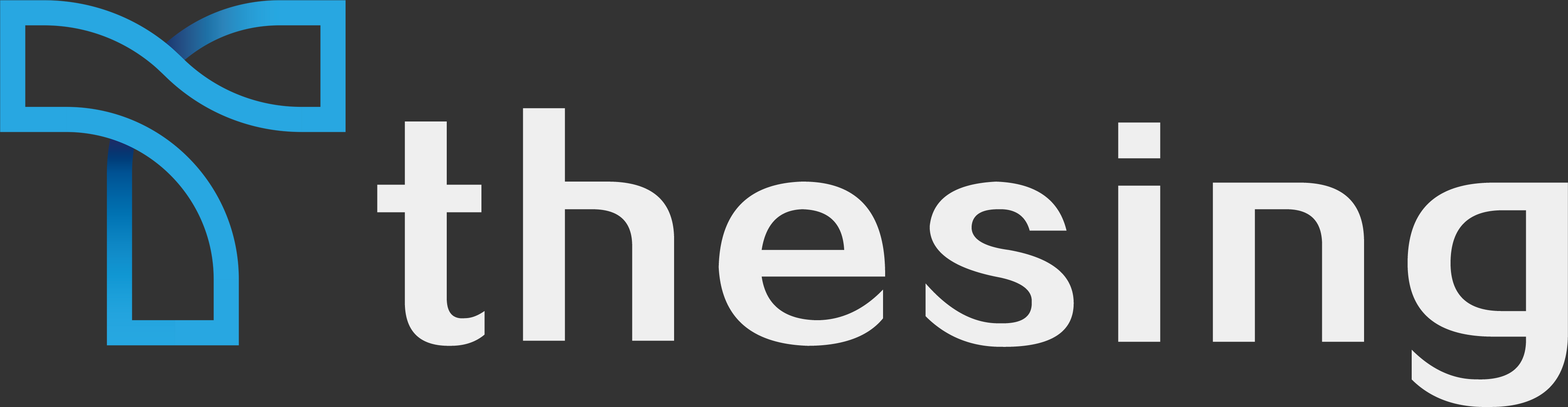
<style>
.page{position:relative;width:1568px;height:407px;background:#333333}
.page>*{position:absolute;margin:0}
.t1{font:261.2px "FZZCHJW--GB1-0";letter-spacing:0.05em;color:#efefef}
</style>
<div class="page">
<p class="t1" style="left:377px;top:108px;width:1191px;height:299px">thesing</p>
</div>
